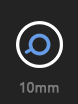
<style>
.page{position:relative;width:78px;height:104px;background:#232323}
.page>*{position:absolute;margin:0}
.t1{font:14px "SegoeUI";color:#7c7c7c;font-weight:bold}
</style>
<div class="page">
<p class="t1" style="left:20px;top:82px;width:39px;height:11px">10mm</p>
</div>
